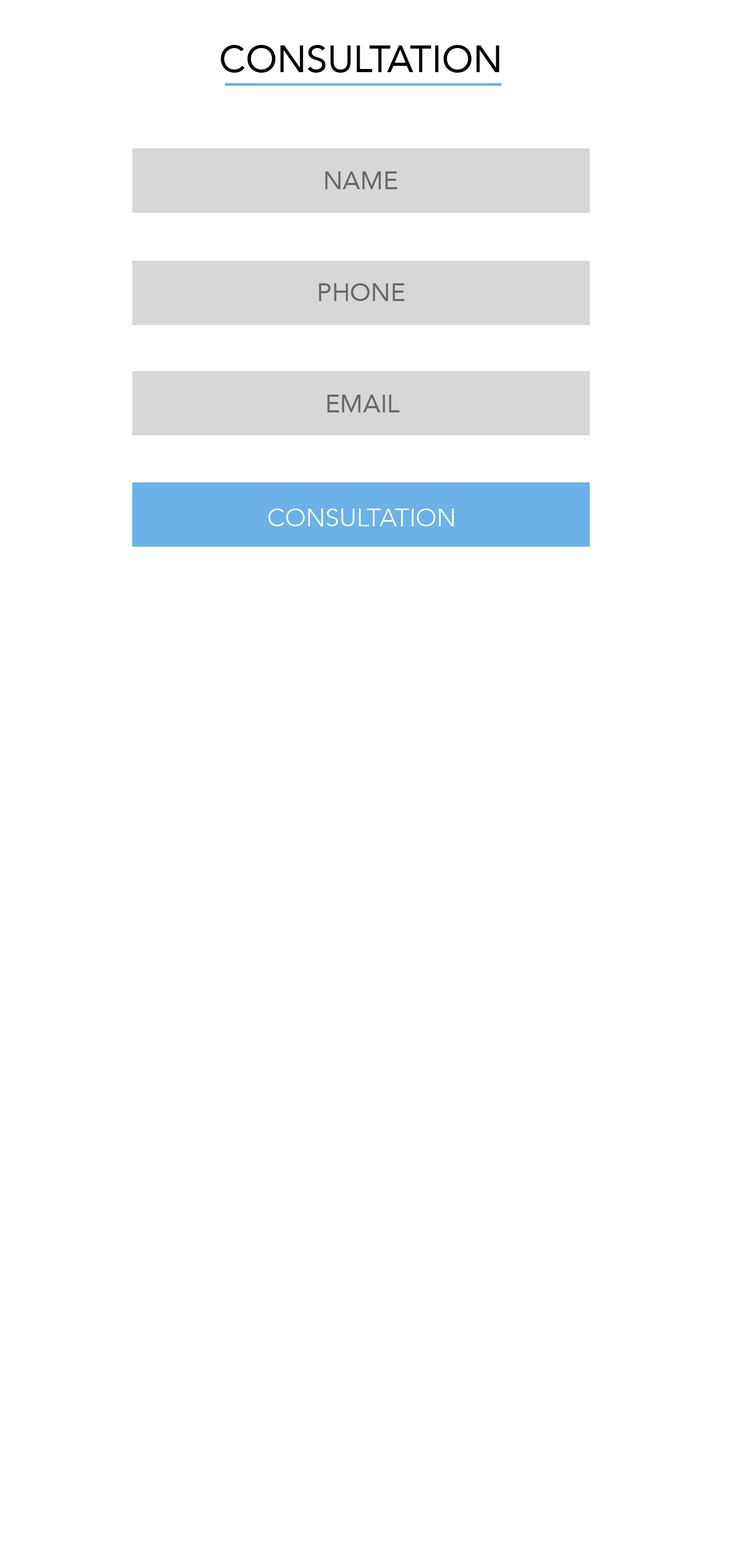
<style>
.page{position:relative;width:732px;height:1568px;background:#ffffff}
.page>*{position:absolute;margin:0}
.t1{font:25.1px "Avenir-Roman";color:#676767}
.t2{font:25.1px "Avenir-Light";color:#ffffff}
</style>
<div class="page">
<p class="t1" style="left:325px;top:171px;width:72px;height:18px">NAME</p>
<p class="t1" style="left:319px;top:283px;width:86px;height:18px">PHONE</p>
<p class="t1" style="left:327px;top:395px;width:72px;height:17px">EMAIL</p>
<p class="t2" style="left:268px;top:509px;width:186px;height:17px">CONSULTATION</p>
</div>
